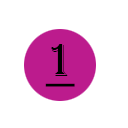
<style>
.page{position:relative;width:128px;height:128px;background:#ffffff}
.page>*{position:absolute;margin:0}
.t1{font:48px "Algerian";color:#000000;text-decoration:underline}
</style>
<div class="page">
<p class="t1" style="left:45px;top:44px;width:30px;height:43px">1</p>
</div>
